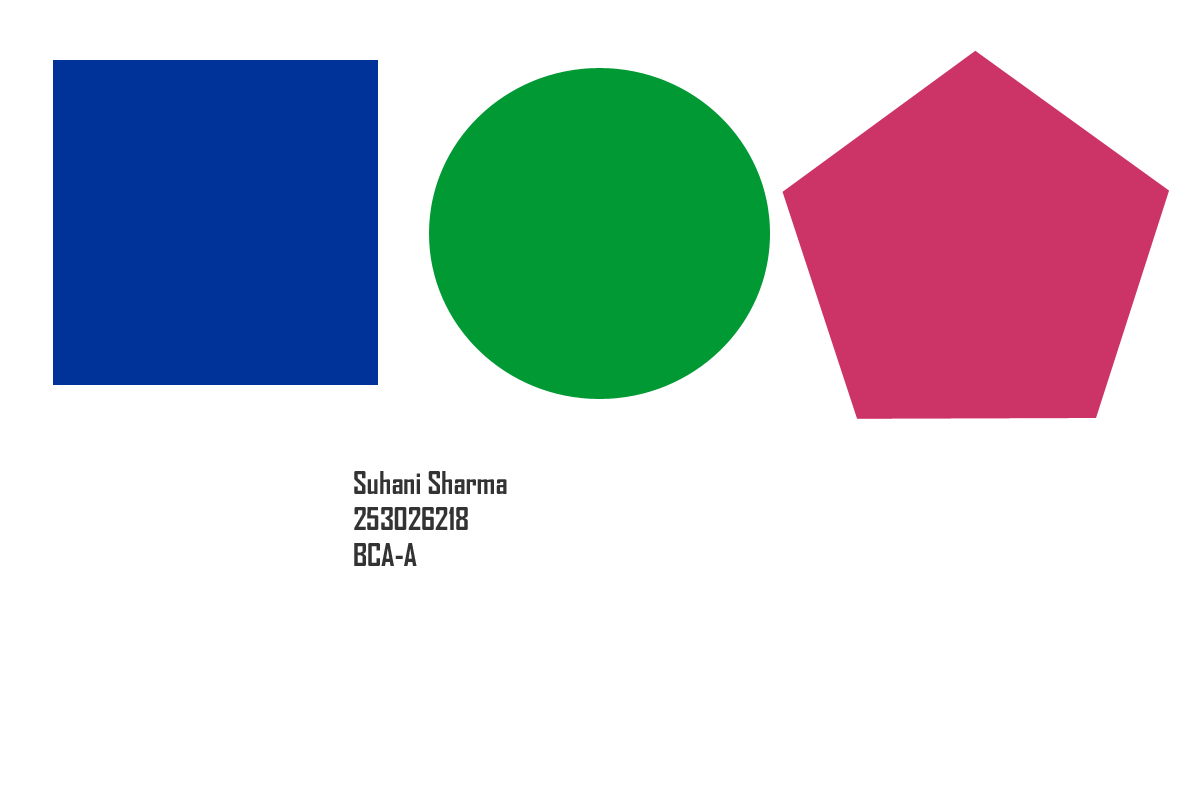
<style>
.page{position:relative;width:1200px;height:800px;background:#ffffff}
.page>*{position:absolute;margin:0}
.t1{font:30px "AgencyFB-Bold";color:#333333}
</style>
<div class="page">
<p class="t1" style="left:354px;top:471px;width:153px;height:95px">Suhani Sharma<br>253026218<br>BCA-A</p>
</div>
